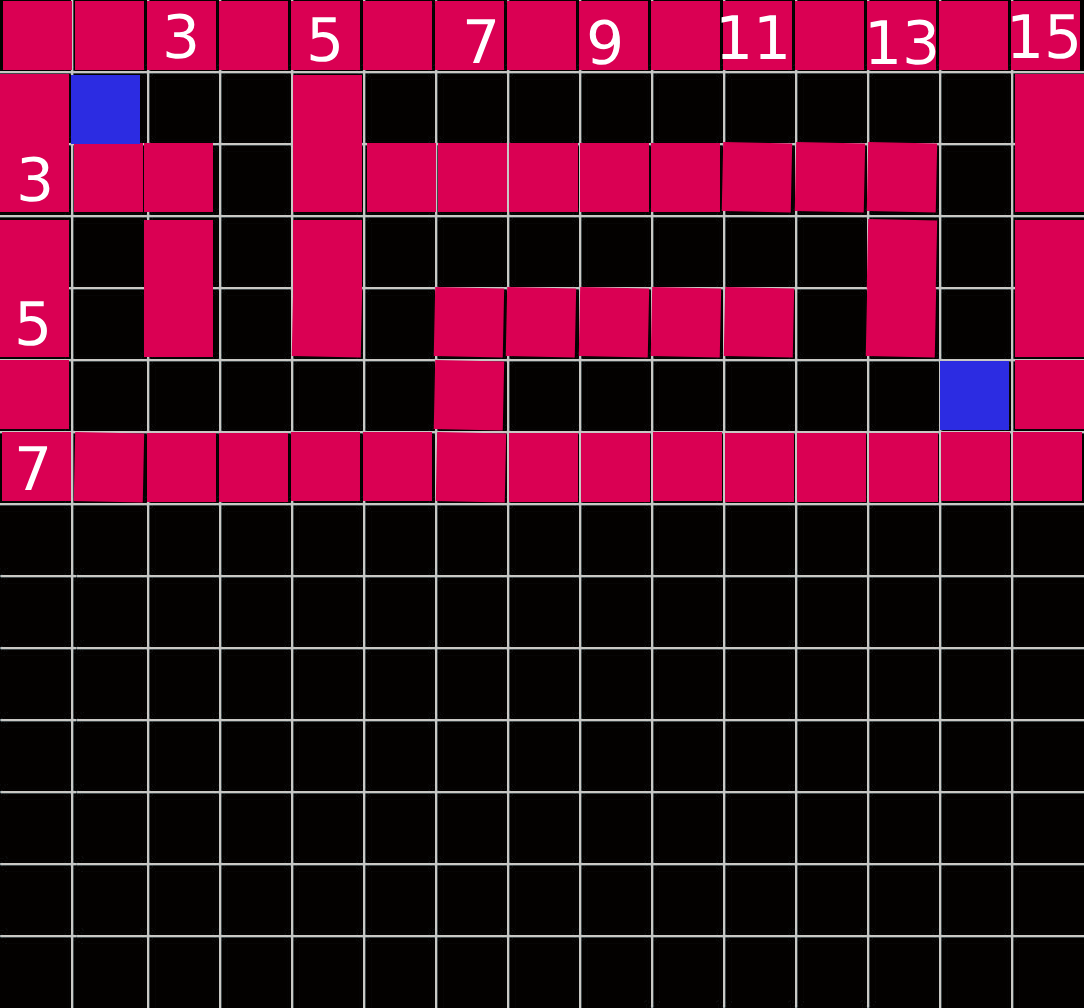
<style>
.page{position:relative;width:1084px;height:1008px;background:#030100}
.page>*{position:absolute;margin:0}
.t1{font:60px "DejaVuSans";color:#ffffff}
</style>
<div class="page">
<p class="t1" style="left:166px;top:13px;width:30px;height:46px">3</p>
<p class="t1" style="left:310px;top:17px;width:29px;height:45px">5</p>
<p class="t1" style="left:721px;top:15px;width:65px;height:44px">11</p>
<p class="t1" style="left:1012px;top:14px;width:65px;height:45px">15</p>
<p class="t1" style="left:466px;top:19px;width:30px;height:44px">7</p>
<p class="t1" style="left:589px;top:19px;width:31px;height:46px">9</p>
<p class="t1" style="left:870px;top:19px;width:66px;height:46px">13</p>
<p class="t1" style="left:20px;top:156px;width:30px;height:46px">3</p>
<p class="t1" style="left:18px;top:301px;width:29px;height:45px">5</p>
<p class="t1" style="left:18px;top:446px;width:30px;height:44px">7</p>
</div>
